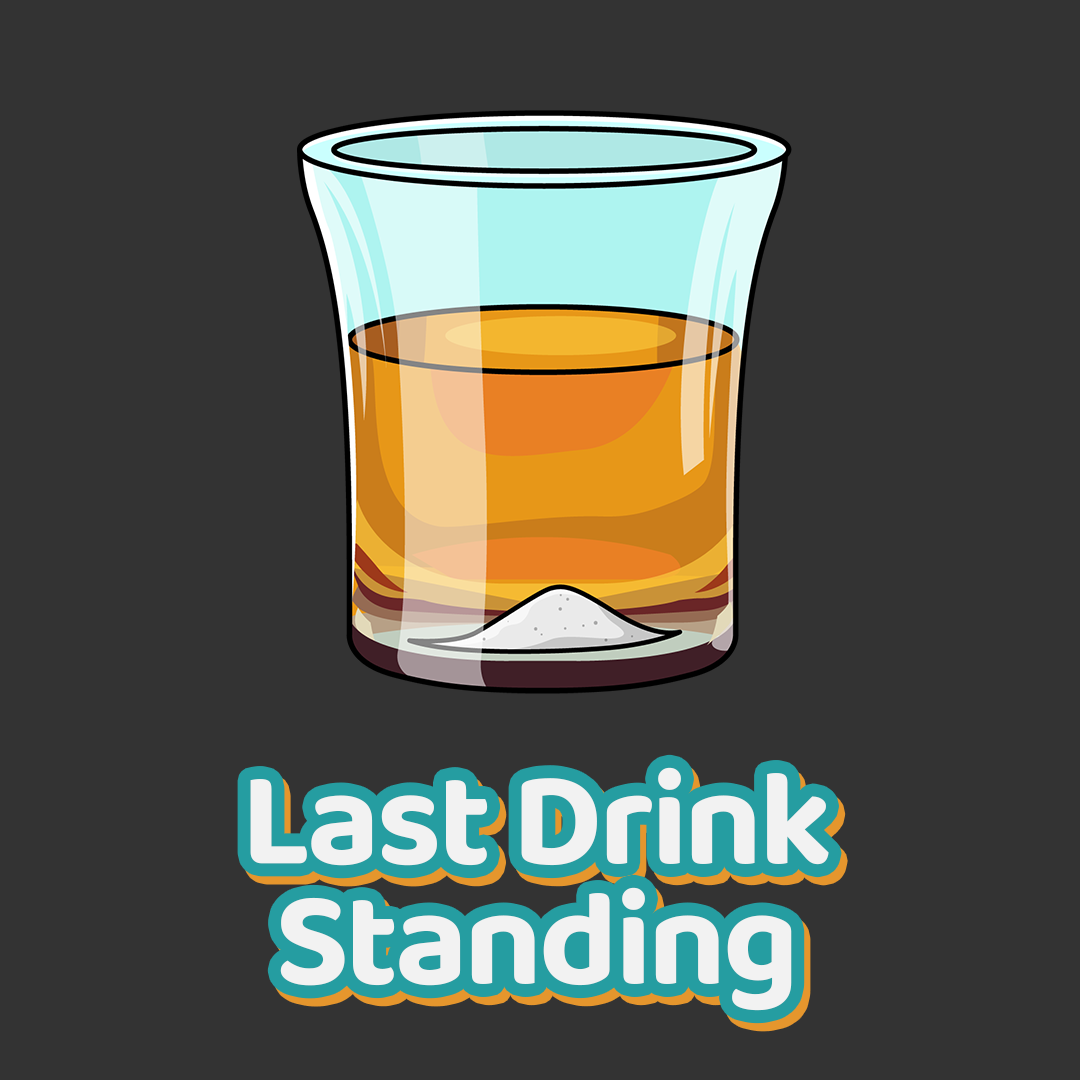
<style>
.page{position:relative;width:1080px;height:1080px;background:#333333}
.page>*{position:absolute;margin:0}
.t1{font:136.3px/120px "Baloo2-Bold";letter-spacing:-0.025em;color:#f2f2f2}
</style>
<div class="page">
<p class="t1" style="left:250px;top:767px;width:579px;height:244px;text-align:center">Last Drink<br>Standing</p>
</div>
